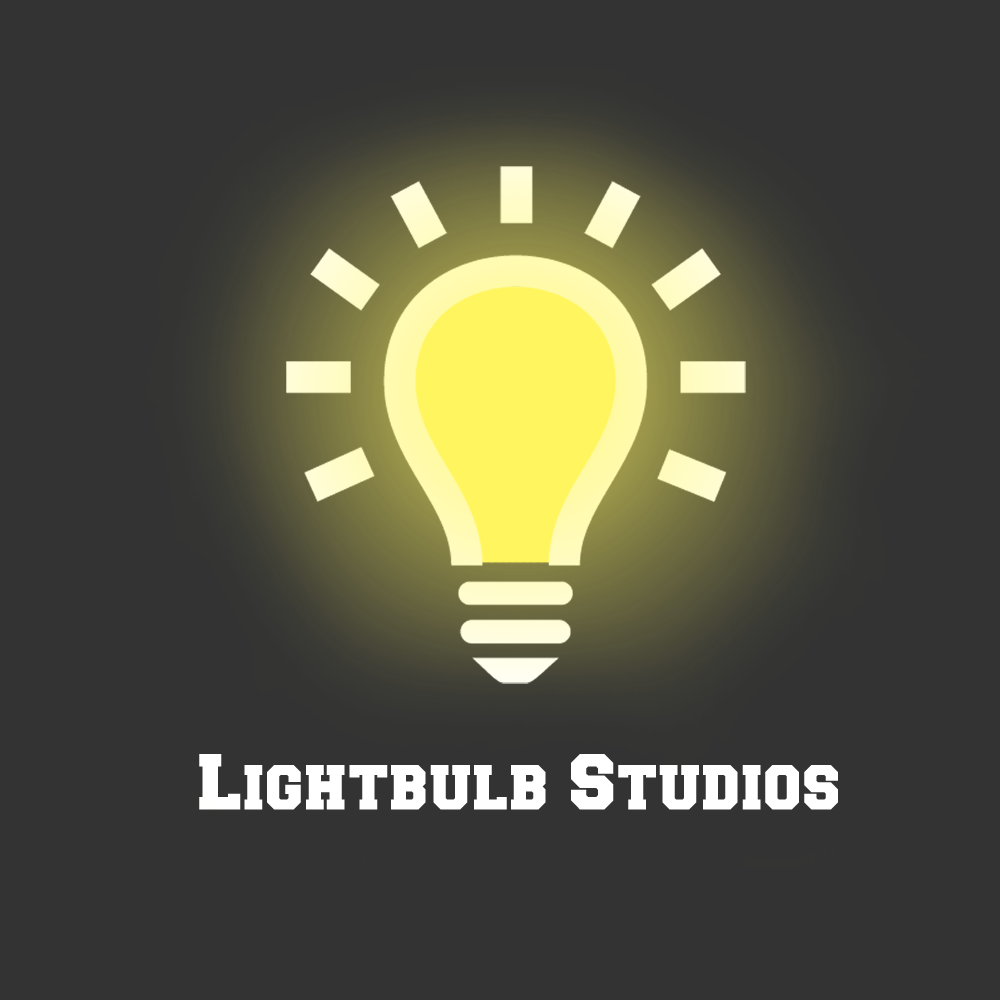
<style>
.page{position:relative;width:1000px;height:1000px;background:#333333}
.page>*{position:absolute;margin:0}
.t1{font:66.7px "Freshman";letter-spacing:0.02em;color:#ffffff}
</style>
<div class="page">
<p class="t1" style="left:199px;top:754px;width:639px;height:56px">Lightbulb Studios</p>
</div>
